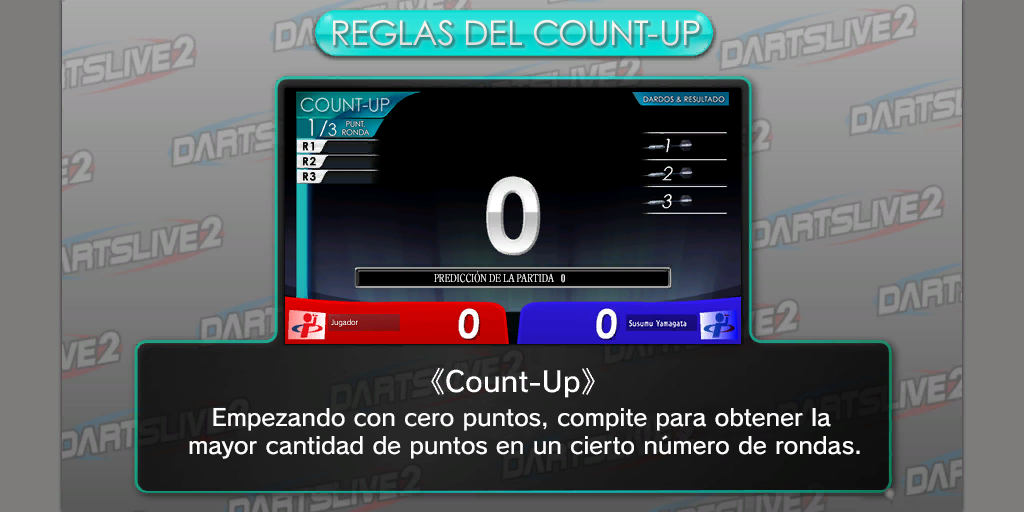
<style>
.page{position:relative;width:1024px;height:512px}
.page>*{position:absolute;margin:0}
.t1{font:34px "CenturyGothicPaneuropean";color:#eae9e6}
.t2{font:11px "CenturyOldStyleStd-Regular";color:#ffffff;text-transform:uppercase;scale:0.77 1}
.t3{font:23px "SCEPS3RodinLATIN-Regular";color:#fdfdfd}
</style>
<div class="page">
<p class="t1" style="left:333px;top:20px;width:367px;height:26px">REGLAS DEL COUNT-UP</p>
<p class="t2" style="left:434px;top:271px;width:120px;height:12px">Predicción de la partida</p>
<p class="t3" style="left:189px;top:408px;width:671px;height:51px;text-align:center">Empezando con cero puntos, compite para obtener la <br>mayor cantidad de puntos en un cierto número de rondas.</p>
</div>
